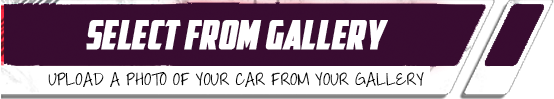
<style>
.page{position:relative;width:554px;height:99px;background:#ffffff}
.page>*{position:absolute;margin:0}
.t1{font:40px "AmericanCaptain";color:#ffffff;text-transform:uppercase;font-weight:bold;font-style:italic}
.t2{font:18px "ThrowMyHandsUpintheAir";letter-spacing:0.025em;color:#000000;text-transform:uppercase}
</style>
<div class="page">
<p class="t1" style="left:86px;top:20px;width:302px;height:30px">select from gallery</p>
<p class="t2" style="left:48px;top:72px;width:376px;height:15px">upload a photo of your car from your gallery</p>
</div>
